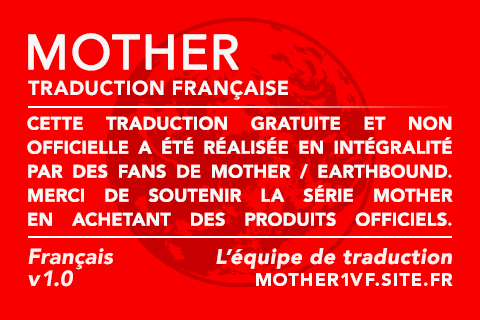
<style>
.page{position:relative;width:480px;height:320px;background:#f80000}
.page>*{position:absolute;margin:0}
.t1{font:48px "AvenirLTStd-Roman";letter-spacing:0.045em;color:#f8f8f8;text-transform:uppercase;font-weight:bold}
.t2{font:20px "AvenirLTPro-Black";letter-spacing:0.012em;color:#f8f8f8;text-transform:uppercase}
.t3{font:18px/24px "AvenirLTPro-Black";color:#f8f8f8;text-transform:uppercase}
.t4{font:22px/22px "AvenirLTPro-BlackOblique";color:#ffffff}
.t5{font:21px "AvenirLTPro-BlackOblique";letter-spacing:0.025em;color:#ffffff}
.t6{font:18px "AvenirLTPro-Black";letter-spacing:0.05em;color:#ffffff;text-transform:uppercase}
</style>
<div class="page">
<p class="t1" style="left:28px;top:33px;width:211px;height:38px">MOTHER</p>
<p class="t2" style="left:28px;top:80px;width:260px;height:20px">Traduction Française</p>
<p class="t3" style="left:27px;top:116px;width:426px;height:110px;text-align:justify">Cette traduction gratuite et non officielle a été réalisée en intégralité par DES fans de Mother / Earthbound. Merci de soutenir la série mother <br>en achetant des produits officiels.</p>
<p class="t4" style="left:28px;top:248px;width:86px;height:39px;opacity:0.9">Français<br>v 1.0</p>
<p class="t5" style="left:216px;top:248px;width:236px;height:21px;opacity:0.9">L’équipe de traduction</p>
<p class="t6" style="left:256px;top:273px;width:197px;height:13px;opacity:0.95">mother1vf.site.fr</p>
</div>
